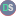
<style>
.page{position:relative;width:16px;height:16px;background:#717d9c}
.page>*{position:absolute;margin:0}
.t1{font:9px "Arial-BoldMT";color:#54d3a1}
.t2{font:9px "Arial-BoldMT";color:#d8d8d8}
</style>
<div class="page">
<p class="t1" style="left:3px;top:4px;width:6px;height:7px">D</p>
<p class="t2" style="left:8px;top:4px;width:6px;height:7px">S</p>
</div>
